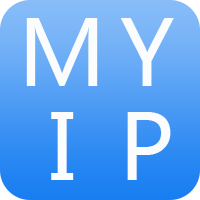
<style>
.page{position:relative;width:200px;height:200px}
.page>*{position:absolute;margin:0}
.t1{font:90px "MicrosoftYaHei";color:#fbfcfd}
</style>
<div class="page">
<p class="t1" style="left:26px;top:18px;width:72px;height:68px">M</p>
<p class="t1" style="left:120px;top:18px;width:54px;height:68px">Y</p>
<p class="t1" style="left:51px;top:112px;width:23px;height:68px">I</p>
<p class="t1" style="left:127px;top:112px;width:44px;height:68px">P</p>
</div>
